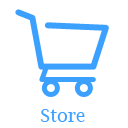
<style>
.page{position:relative;width:128px;height:128px;background:#ffffff}
.page>*{position:absolute;margin:0}
.t1{font:18px "LucidaBright";color:#3ca0ff}
</style>
<div class="page">
<p class="t1" style="left:41px;top:109px;width:44px;height:13px">Store</p>
</div>
